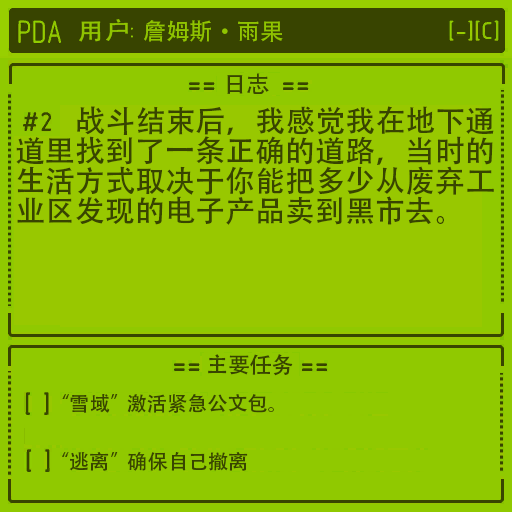
<style>
.page{position:relative;width:512px;height:512px;background:#90c900}
.page>*{position:absolute;margin:0}
.t1{font:30px/30px "AdobeHeitiStd-Regular";color:#384400}
</style>
<div class="page">
<p class="t1" style="left:16px;top:106px;width:478px;height:119px">战斗结束后，我感觉我在地下通<br>道里找到了一条正确的道路，当时的<br>生活方式取决于你能把多少从废弃工<br>业区发现的电子产品卖到黑市去。</p>
</div>
